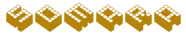
<style>
.page{position:relative;width:186px;height:36px;background:#ffffff}
.page>*{position:absolute;margin:0}
.t1{font:36px "Cubicle";color:#b68309}
</style>
<div class="page">
<p class="t1" style="left:6px;top:2px;width:175px;height:30px">SOMARA</p>
</div>
